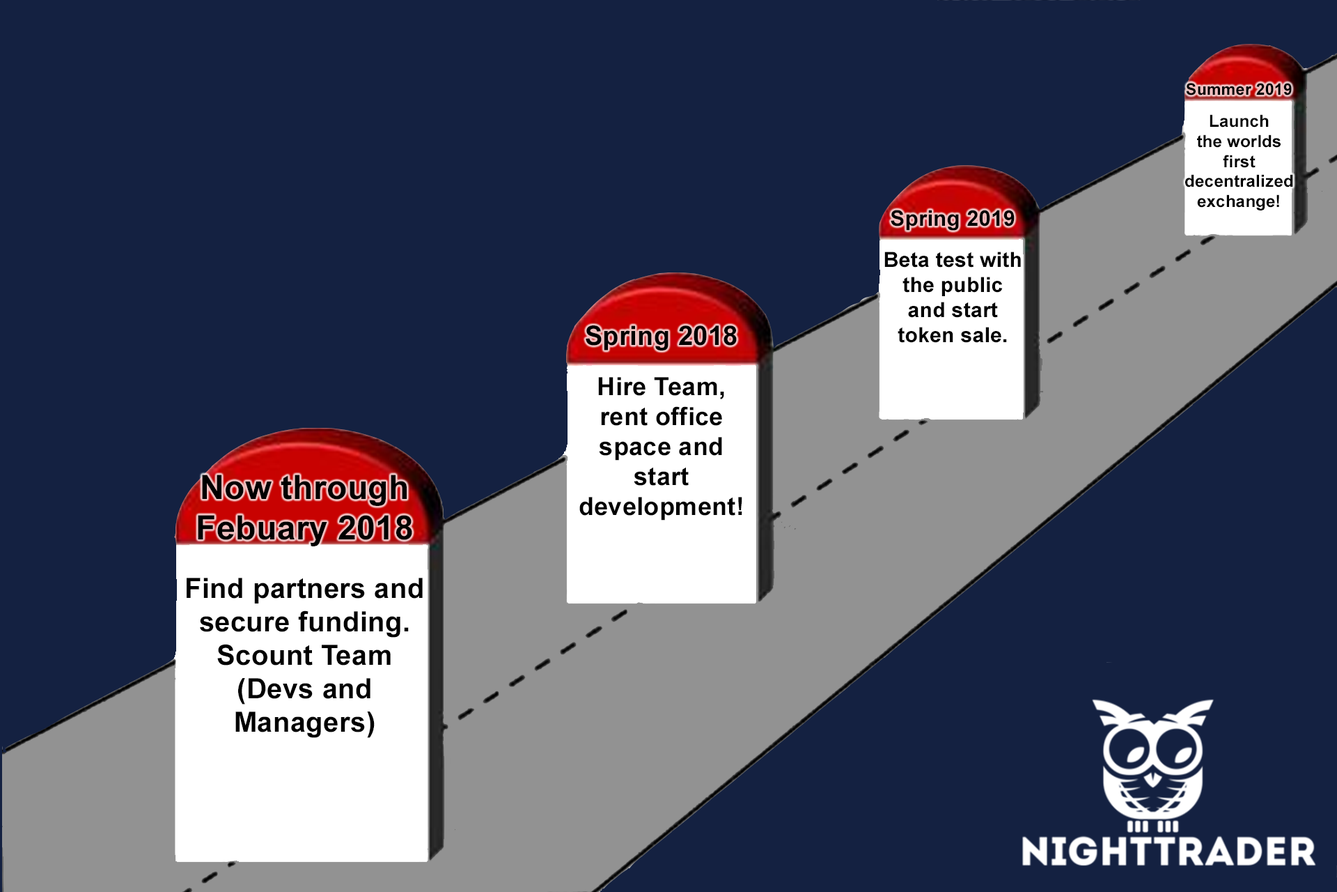
<style>
.page{position:relative;width:1337px;height:892px;background:#142141}
.page>*{position:absolute;margin:0}
.t1{font:16.7px "Arial-BoldMT";letter-spacing:0.01em;color:#000000}
.t2{font:16.1px "Arial-BoldMT";letter-spacing:0.01em;color:#000000}
.t3{font:20.9px "Arial-BoldMT";letter-spacing:0.01em;color:#000000}
.t4{font:21.7px "Arial-BoldMT";letter-spacing:0.01em;color:#000000}
.t5{font:25.1px "Arial-BoldMT";letter-spacing:0.01em;color:#000000}
.t6{font:26.6px "Arial-BoldMT";letter-spacing:0.01em;color:#000000}
.t7{font:27.9px "Arial-BoldMT";letter-spacing:0.01em;color:#000000}
.t8{font:33.4px "Arial-BoldMT";letter-spacing:0.01em;color:#000000}
</style>
<div class="page">
<p class="t1" style="left:1186px;top:83px;width:108px;height:127px;text-align:center"><span class="t2">Summer 2019<br> <br></span>Launch<br>the worlds<br>first<br>decentralized<br>exchange!</p>
<p class="t3" style="left:885px;top:210px;width:136px;height:133px;text-align:center"><span class="t4">Spring 2019<br> <br></span>Beta test with<br>the public<br>and start<br>token sale.</p>
<p class="t5" style="left:580px;top:325px;width:163px;height:195px;text-align:center"><span class="t6">Spring 2018<br> <br></span>Hire Team,<br>rent office space and<br>start<br>development!</p>
<p class="t7" style="left:187px;top:474px;width:236px;height:264px;text-align:center"><span class="t8">Now through<br>Febuary 2018<br> <br></span>Find partners and secure funding.<br>Scount Team <br>(Devs and <br>Managers)</p>
</div>
